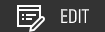
<style>
.page{position:relative;width:105px;height:32px;background:#333333}
.page>*{position:absolute;margin:0}
.t1{font:20px "D-DINCondensed";color:#ffffff}
</style>
<div class="page">
<p class="t1" style="left:61px;top:9px;width:28px;height:14px">EDIT</p>
</div>
